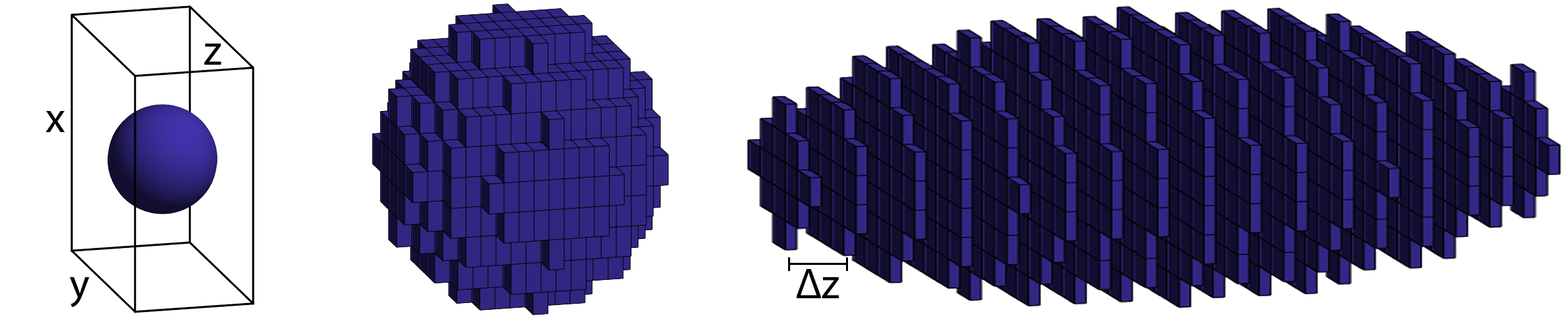
<style>
.page{position:relative;width:1568px;height:318px;background:#ffffff}
.page>*{position:absolute;margin:0}
.t1{font:42.6px "MyriadPro-Regular";color:#000000}
</style>
<div class="page">
<p class="t1" style="left:204px;top:44px;width:17px;height:21px">z</p>
<p class="t1" style="left:46px;top:111px;width:19px;height:21px">x</p>
<p class="t1" style="left:796px;top:269px;width:43px;height:29px">Δz</p>
<p class="t1" style="left:69px;top:277px;width:20px;height:30px">y</p>
</div>
